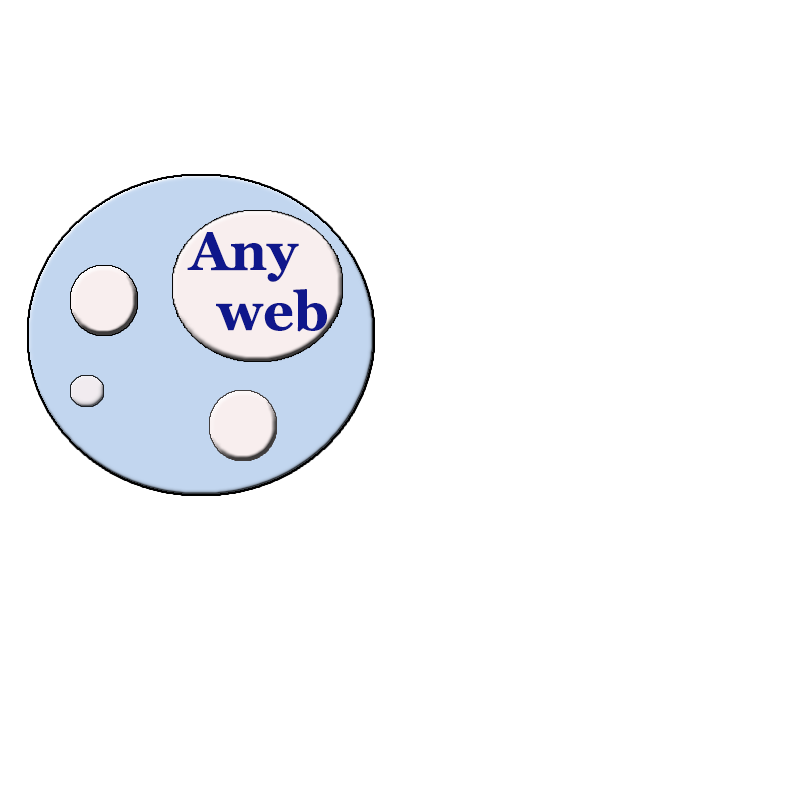
<style>
.page{position:relative;width:800px;height:800px;background:#ffffff}
.page>*{position:absolute;margin:0}
.t1{font:54px/60px "Georgia-Bold";color:#0f178b}
</style>
<div class="page">
<p class="t1" style="left:187px;top:232px;width:140px;height:100px;text-align:right">Any<br>  web</p>
</div>
